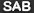
<style>
.page{position:relative;width:34px;height:13px}
.page>*{position:absolute;margin:0}
.t1{font:13.9px "K2D-ExtraBold";color:#ffffff}
</style>
<div class="page">
<p class="t1" style="left:3px;top:1px;width:28px;height:11px">SAB</p>
</div>
